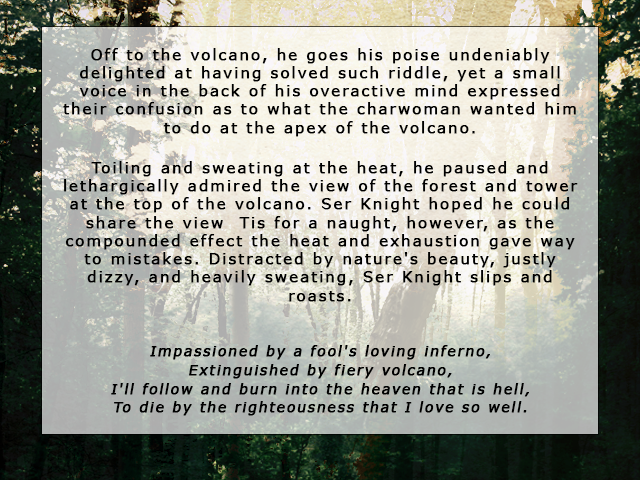
<style>
.page{position:relative;width:640px;height:480px}
.page>*{position:absolute;margin:0}
.t1{font:15.2px "Verdana";letter-spacing:0.1em;color:#000000;font-weight:bold}
.t2{font:14px "Verdana";letter-spacing:0.1em;color:#000000;font-weight:bold;font-style:italic}
</style>
<div class="page">
<p class="t1" style="left:63px;top:48px;width:515px;height:368px;text-align:center">Off to the volcano, he goes his poise undeniably delighted at having solved such riddle, yet a small voice in the back of his overactive mind expressed their confusion as to what the charwoman wanted him to do at the apex of the volcano. <br><br>Toiling and sweating at the heat, he paused and lethargically admired the view of the forest and tower at the top of the volcano. Ser Knight hoped he could share the view  Tis for a naught, however, as the compounded effect the heat and exhaustion gave way to mistakes. Distracted by nature's beauty, justly dizzy, and heavily sweating, Ser Knight slips and roasts. <br><br><br><span class="t2">Impassioned by a fool's loving inferno,<br>Extinguished by fiery volcano,<br>I'll follow and burn into the heaven that is hell,<br>To die by the righteousness that I love so well.</span></p>
</div>
